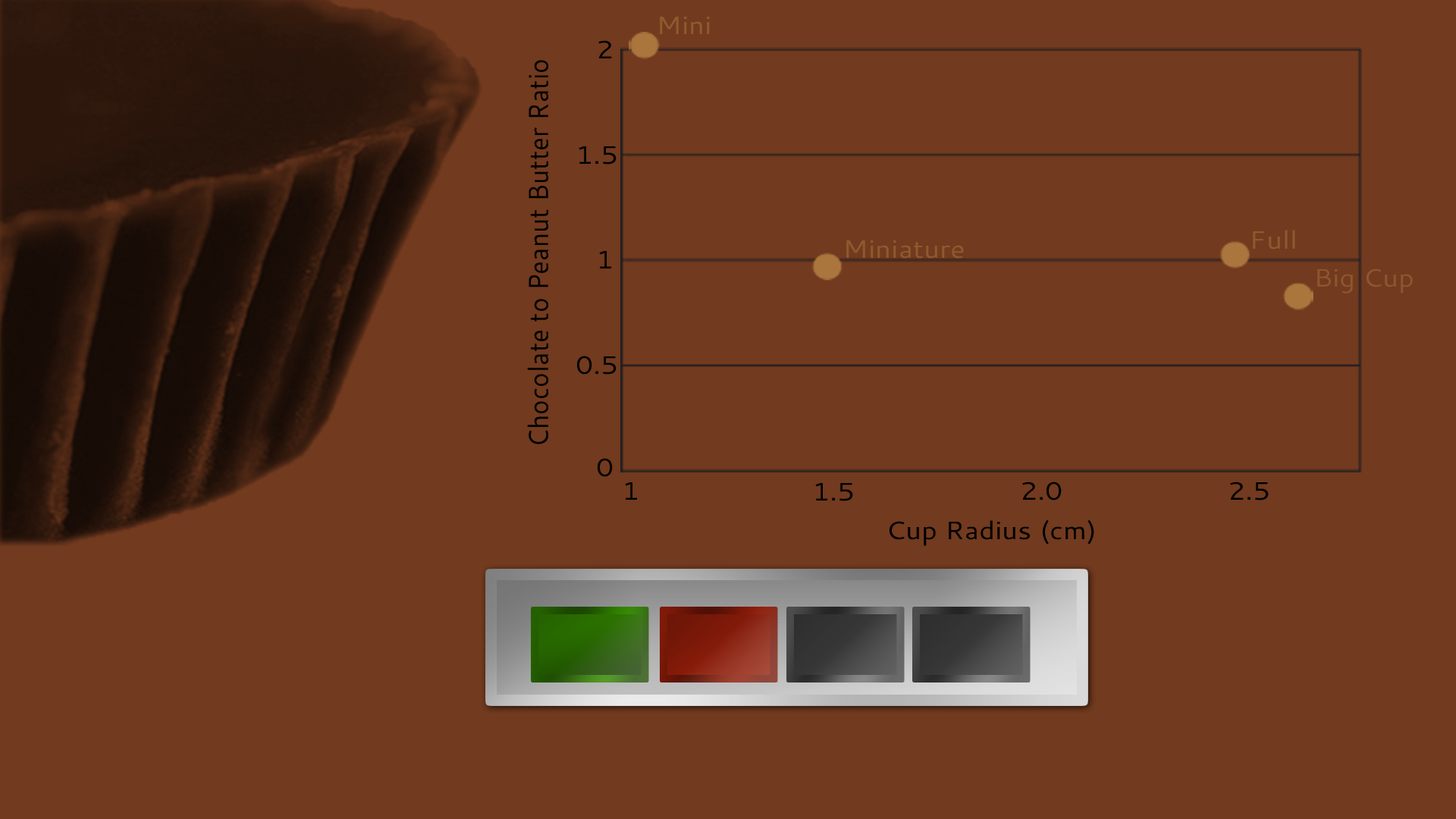
<style>
.page{position:relative;width:1456px;height:819px;background:#723a1e}
.page>*{position:absolute;margin:0}
.t1{font:25.3px "Cantarell-Regular";color:#905a2f;scale:1.1 1}
.t2{font:25.3px "Cantarell-Regular";color:#000000;scale:1.1 1}
.t3{font:27.8px "Cantarell-Regular";color:#000000;scale:0.91 1}
.t4{font:25.3px "Cantarell-Regular";color:#8f592f;scale:1.1 1}
.t5{font:25.3px "Cantarell-Regular";color:#8d562d;scale:1.1 1}
</style>
<div class="page">
<p class="t1" style="left:660px;top:17px;width:50px;height:17px">Mini</p>
<p class="t2" style="left:598px;top:40px;width:14px;height:18px">2</p>
<p class="t3" style="left:527px;top:60px;width:21px;height:384px;rotate:-90deg">Chocolate to Peanut Butter Ratio</p>
<p class="t2" style="left:579px;top:146px;width:38px;height:19px">1.5</p>
<p class="t4" style="left:1253px;top:230px;width:42px;height:19px">Full</p>
<p class="t4" style="left:846px;top:240px;width:118px;height:19px">Miniature</p>
<p class="t2" style="left:599px;top:251px;width:12px;height:17px">1</p>
<p class="t5" style="left:1317px;top:268px;width:96px;height:25px">Big Cup</p>
<p class="t2" style="left:577px;top:356px;width:40px;height:19px">0.5</p>
<p class="t2" style="left:598px;top:458px;width:15px;height:19px">0</p>
<p class="t2" style="left:625px;top:482px;width:12px;height:18px">1</p>
<p class="t2" style="left:815px;top:483px;width:38px;height:18px">1.5</p>
<p class="t2" style="left:1022px;top:482px;width:40px;height:18px">2.0</p>
<p class="t2" style="left:1230px;top:482px;width:39px;height:18px">2.5</p>
<p class="t2" style="left:890px;top:520px;width:204px;height:26px">Cup Radius (cm)</p>
</div>
